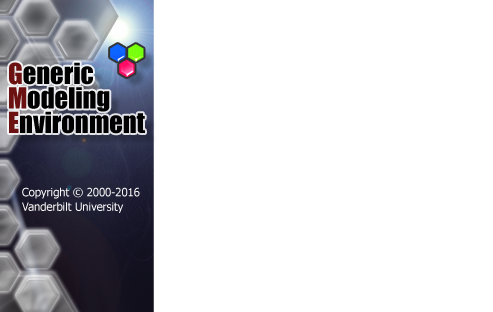
<style>
.page{position:relative;width:493px;height:312px;background:#ffffff}
.page>*{position:absolute;margin:0}
.t1{font:26.7px/24.5px "Impact";letter-spacing:-0.002em;color:#000000}
.t2{font:26.7px/24.5px "Impact";letter-spacing:-0.002em;color:#6b1111}
.t3{font:11.2px/14.3px "Tahoma";letter-spacing:-0.002em;color:#ffffff}
.t4{font:11.2px/24.5px "Tahoma";letter-spacing:-0.002em;color:#000000}
</style>
<div class="page">
<p class="t1" style="left:9px;top:62px;width:136px;height:72px"><span class="t2">G</span>eneric<br><span class="t2">M</span>odeling<br><span class="t2">E</span>nvironment</p>
<p class="t3" style="left:22px;top:187px;width:118px;height:26px;text-align:center"><span class="t4"><br></span>Copyright © 2000-2016 <br>Vanderbilt University</p>
</div>
